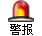
<style>
.page{position:relative;width:42px;height:36px;background:#ffffff}
.page>*{position:absolute;margin:0}
.t1{font:12px "SimSun";letter-spacing:0.02em;color:#000000}
</style>
<div class="page">
<p class="t1" style="left:10px;top:24px;width:23px;height:11px">警报</p>
</div>
